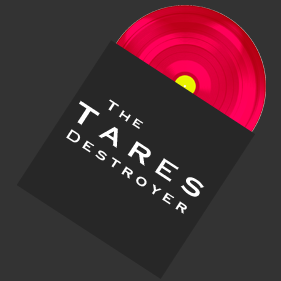
<style>
.page{position:relative;width:281px;height:281px;background:#333333}
.page>*{position:absolute;margin:0}
.t1{font:28px "Cornerstone";letter-spacing:0.32em;color:#ffffff;scale:1.18 1}
.t2{font:13px "Cornerstone";letter-spacing:0.32em;color:#ffffff;scale:1.18 1}
.t3{font:14px "Cornerstone";letter-spacing:0.32em;color:#ffffff;scale:1.18 1}
</style>
<div class="page">
<p class="t1" style="left:77px;top:100px;width:128px;height:97px;rotate:33deg">Tares</p>
<p class="t2" style="left:108px;top:99px;width:36px;height:30px;rotate:33deg"><span class="t3"><br><br></span>The</p>
<p class="t3" style="left:66px;top:129px;width:121px;height:85px;rotate:33deg">Destroyer</p>
</div>
